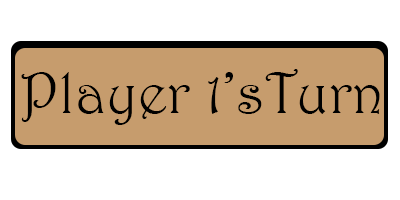
<style>
.page{position:relative;width:400px;height:200px;background:#ffffff}
.page>*{position:absolute;margin:0}
.t1{font:58.3px "Harrington";color:#000000}
</style>
<div class="page">
<p class="t1" style="left:21px;top:69px;width:359px;height:56px">Player 1’sTurn</p>
</div>
